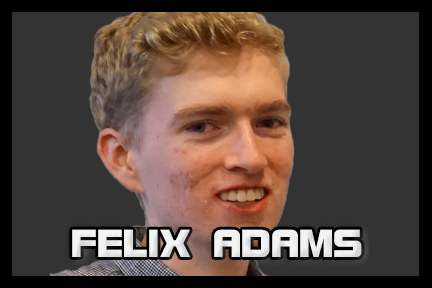
<style>
.page{position:relative;width:432px;height:288px;background:#333333}
.page>*{position:absolute;margin:0}
.t1{font:41.7px "BolsterBold";color:#f3f3f3}
</style>
<div class="page">
<p class="t1" style="left:72px;top:229px;width:290px;height:28px">FELIX ADAMS</p>
</div>
